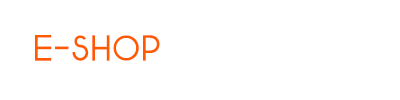
<style>
.page{position:relative;width:400px;height:100px;background:#ffffff}
.page>*{position:absolute;margin:0}
.t1{font:36px "phantom-light";letter-spacing:0.04em;color:#ff5a00;font-weight:bold}
</style>
<div class="page">
<p class="t1" style="left:35px;top:35px;width:125px;height:26px">E-shop</p>
</div>
